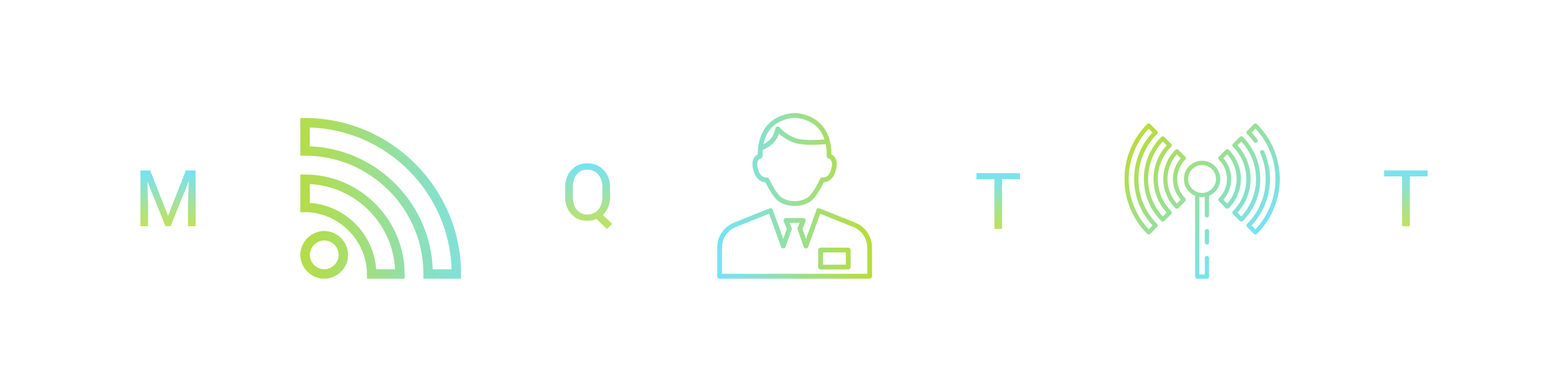
<style>
.page{position:relative;width:1568px;height:392px;background:#ffffff}
.page>*{position:absolute;margin:0}
.t1{font:78.4px "Roboto-Regular";letter-spacing:0.025em}
</style>
<div class="page">
<p class="t1" style="left:140px;top:170px;width:56px;height:56px">M</p>
<p class="t1" style="left:565px;top:163px;width:47px;height:66px">Q</p>
<p class="t1" style="left:976px;top:173px;width:44px;height:56px">T</p>
<p class="t1" style="left:1384px;top:170px;width:44px;height:56px">T</p>
</div>
